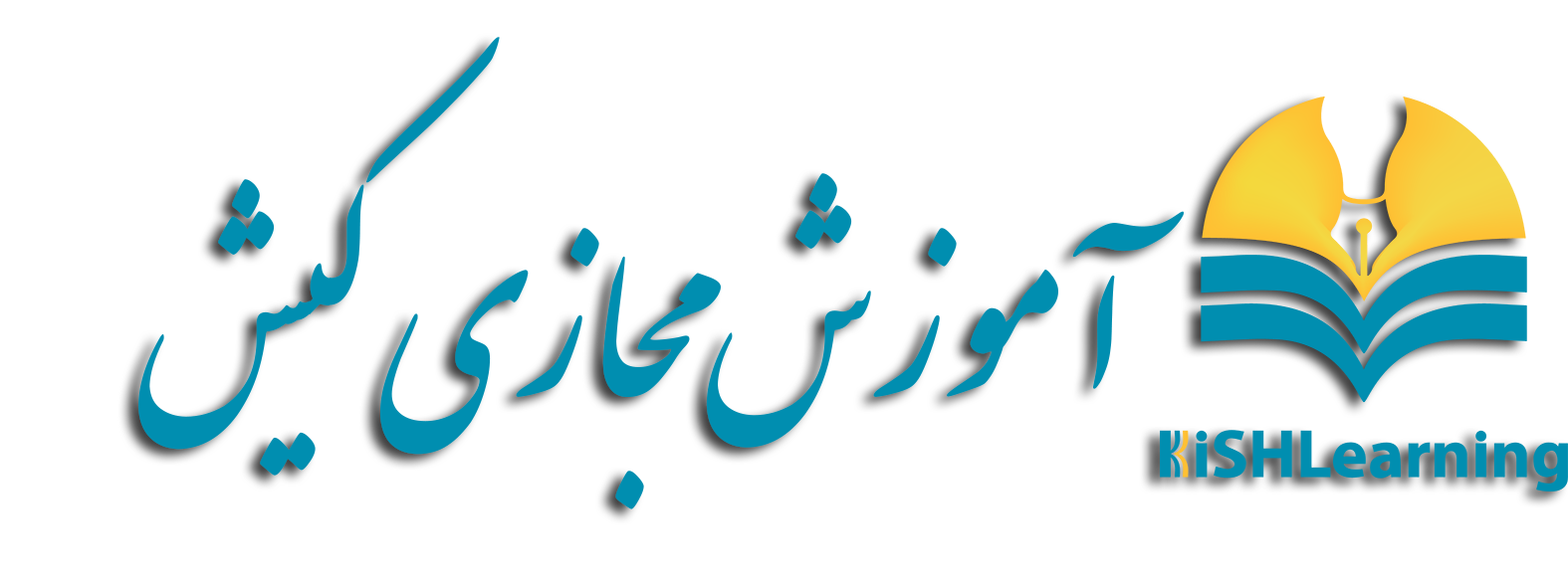
<style>
.page{position:relative;width:1568px;height:588px;background:#ffffff}
.page>*{position:absolute;margin:0}
.t1{font:207.4px "IranNastaliq";color:#008eb0}
</style>
<div class="page">
<p class="t1" style="left:138px;top:37px;width:1046px;height:473px">آموزش مجازی کیش</p>
</div>
